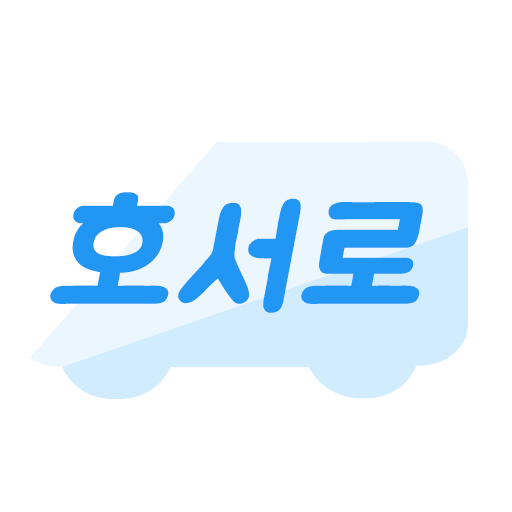
<style>
.page{position:relative;width:512px;height:512px;background:#ffffff}
.page>*{position:absolute;margin:0}
.t1{font:140px "BMJUA";color:#2196f3;font-weight:bold;font-style:italic;scale:1.08 1}
</style>
<div class="page">
<p class="t1" style="left:50px;top:192px;width:373px;height:121px">호서로</p>
</div>
